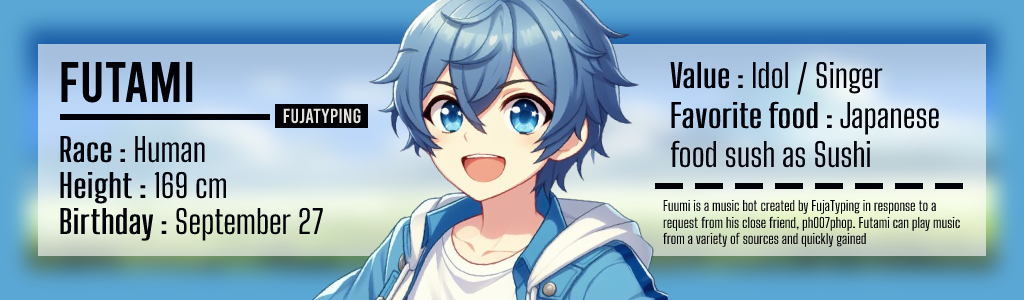
<style>
.page{position:relative;width:1024px;height:300px}
.page>*{position:absolute;margin:0}
.t1{font:57.3px "Bebas-Regular";color:#010108}
.t2{font:32.4px "BigShouldersText-Regular";color:#010108}
.t3{font:32.4px "BigShouldersText-Regular";color:#010108;font-weight:bold}
.t4{font:20.4px "Bebas-Regular";color:#e4e2d9}
.t5{font:13.8px "BigShouldersText-Regular";color:#010108}
</style>
<div class="page">
<p class="t1" style="left:61px;top:61px;width:132px;height:42px">FUTAMI</p>
<p class="t2" style="left:670px;top:61px;width:213px;height:34px"><span class="t3">Value </span>: Idol / Singer</p>
<p class="t2" style="left:670px;top:101px;width:269px;height:67px"><span class="t3">Favorite food </span>: Japanese<br>food sush as Sushi</p>
<p class="t4" style="left:283px;top:108px;width:78px;height:16px">FUJATYPING</p>
<p class="t2" style="left:60px;top:136px;width:145px;height:27px"><span class="t3">Race </span>: Human</p>
<p class="t2" style="left:60px;top:171px;width:167px;height:33px"><span class="t3">Height </span>: 169 cm</p>
<p class="t2" style="left:60px;top:207px;width:263px;height:34px"><span class="t3">Birthday </span>: September 27</p>
<p class="t5" style="left:663px;top:199px;width:297px;height:48px">Fuumi is a music bot created by FujaTyping in response to a <br>request from his close friend, ph007phop. Futami can play music <br>from a variety of sources and quickly gained</p>
</div>
